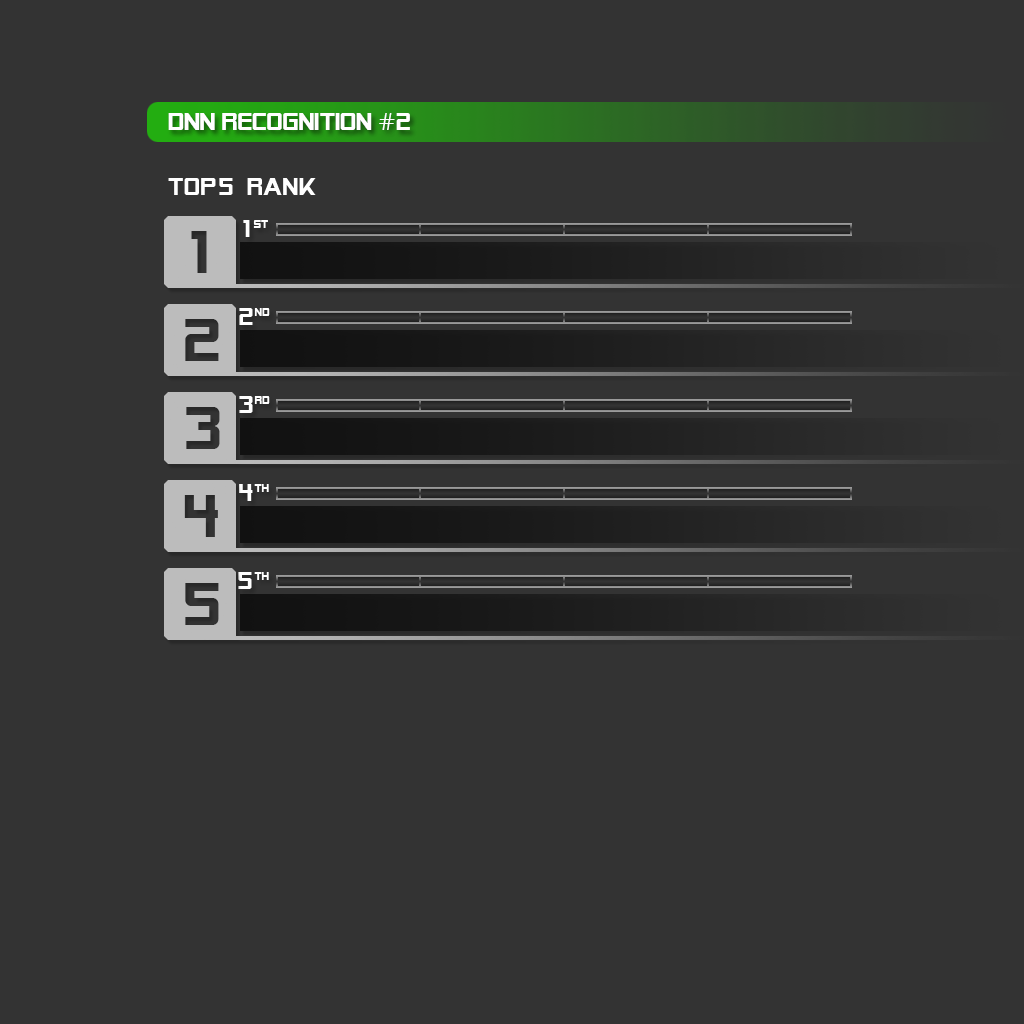
<style>
.page{position:relative;width:1024px;height:1024px;background:#333333}
.page>*{position:absolute;margin:0}
.t1{font:24px "AlienEncountersSolid";color:#ffffff}
.t2{font:24px "Gulim";color:#ffffff}
.t3{font:24px "SFAlienEncountersSolid";color:#ffffff}
.t4{font:11px "SFAlienEncountersSolid";color:#ffffff}
</style>
<div class="page">
<p class="t1" style="left:168px;top:113px;width:242px;height:17px">DNN recognition <span class="t2">#</span>2</p>
<p class="t3" style="left:168px;top:178px;width:148px;height:17px">TOp5 RANK</p>
<p class="t3" style="left:243px;top:220px;width:7px;height:17px">1</p>
<p class="t4" style="left:253px;top:220px;width:15px;height:8px">st</p>
<p class="t3" style="left:239px;top:308px;width:14px;height:17px">2</p>
<p class="t4" style="left:254px;top:308px;width:16px;height:8px">nd</p>
<p class="t3" style="left:239px;top:396px;width:14px;height:17px">3</p>
<p class="t4" style="left:254px;top:396px;width:16px;height:8px">rd</p>
<p class="t3" style="left:239px;top:484px;width:14px;height:17px">4</p>
<p class="t4" style="left:254px;top:484px;width:15px;height:8px">th</p>
<p class="t3" style="left:238px;top:572px;width:14px;height:17px">5</p>
<p class="t4" style="left:254px;top:572px;width:15px;height:8px">th</p>
</div>
